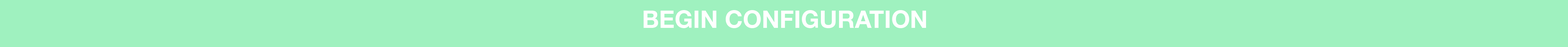
<style>
.page{position:relative;width:1568px;height:47px;background:#9ff1bf}
.page>*{position:absolute;margin:0}
.t1{font:24.2px "HelveticaNeue-Bold";color:#ffffff}
</style>
<div class="page">
<p class="t1" style="left:644px;top:10px;width:282px;height:18px">BEGIN CONFIGURATION</p>
</div>
